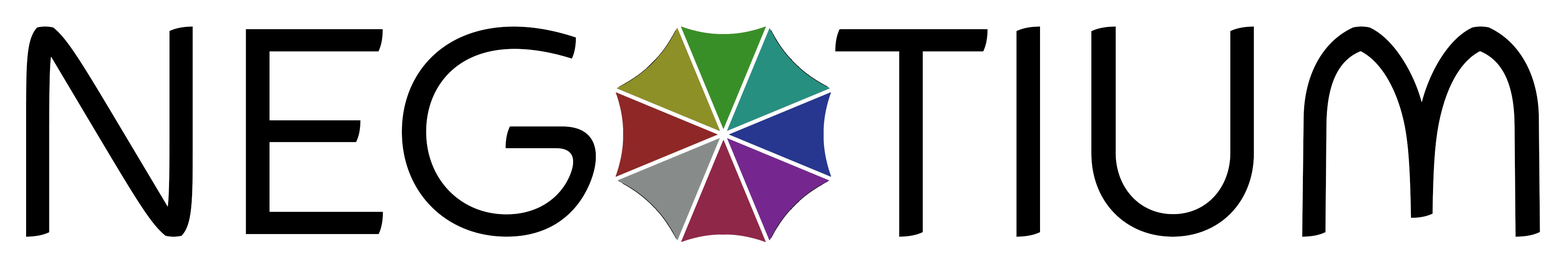
<style>
.page{position:relative;width:1568px;height:265px;background:#ffffff}
.page>*{position:absolute;margin:0}
.t1{font:300.9px "Animo-DEMO";color:#000000}
</style>
<div class="page">
<p class="t1" style="left:26px;top:26px;width:1514px;height:211px">NEG   TIUM</p>
</div>
